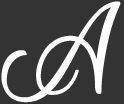
<style>
.page{position:relative;width:124px;height:104px;background:#333333}
.page>*{position:absolute;margin:0}
.t1{font:135px "EuphoriaScript-Regular";color:#ffffff;font-weight:bold}
</style>
<div class="page">
<p class="t1" style="left:1px;top:1px;width:120px;height:102px">A</p>
</div>
